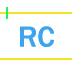
<style>
.page{position:relative;width:72px;height:72px;background:#ffffff}
.page>*{position:absolute;margin:0}
.t1{font:30px "FranklinGothic-Medium";color:#3da5ee}
</style>
<div class="page">
<p class="t1" style="left:20px;top:26px;width:34px;height:21px">RC</p>
</div>
